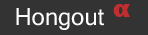
<style>
.page{position:relative;width:148px;height:35px;background:#333333}
.page>*{position:absolute;margin:0}
.t1{font:24.9px "FranklinGothic-Heavy";color:#c02f2f}
.t2{font:25.8px "Gautami";color:#fefefe}
</style>
<div class="page">
<p class="t1" style="left:113px;top:4px;width:17px;height:13px">α</p>
<p class="t2" style="left:16px;top:8px;width:88px;height:22px">Hongout</p>
</div>
